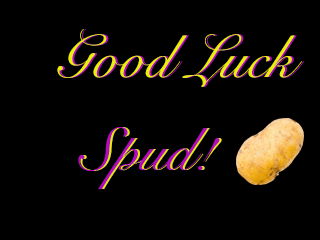
<style>
.page{position:relative;width:320px;height:240px;background:#000000}
.page>*{position:absolute;margin:0}
.t1{font:60px "SnellRoundhand";color:#ebee08}
.t2{font:60px "SnellRoundhand"}
.t3{font:60px "SnellRoundhand";color:#b20cbc}
</style>
<div class="page">
<p class="t1" style="left:57px;top:29px;width:245px;height:58px">Good Luck</p>
<p class="t2" style="left:59px;top:29px;width:245px;height:58px">Good Luck</p>
<p class="t3" style="left:78px;top:127px;width:142px;height:62px">Spud!</p>
<p class="t2" style="left:80px;top:127px;width:142px;height:62px">Spud!</p>
</div>
